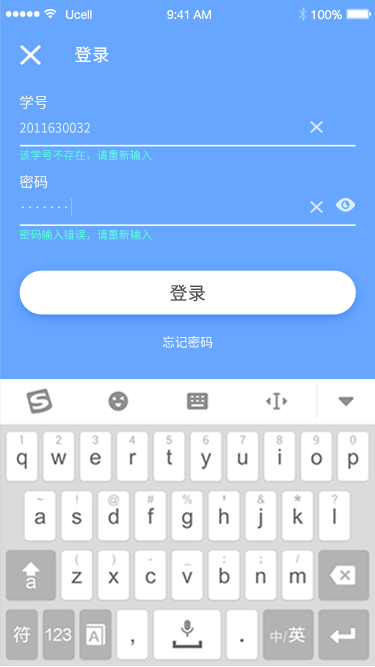
<style>
.page{position:relative;width:375px;height:667px;background:#66a6ff}
.page>*{position:absolute;margin:0}
.t1{font:17.4px "NotoSansHans-Regular";color:#ffffff}
.t2{font:14.6px "NotoSansHans-Regular";color:#ffffff;text-transform:uppercase}
.t3{font:12.9px "NotoSansHans-Regular";color:#e6efff;text-transform:uppercase}
.t4{font:11.1px "NotoSansHans-Regular";color:#57ffda;text-transform:uppercase}
.t5{font:17.9px "NotoSansHans-Regular";letter-spacing:0.02em;color:#535353}
.t6{font:13px "NotoSansHans-Regular";letter-spacing:-0.02em;color:#ffffff}
</style>
<div class="page">
<p class="t1" style="left:75px;top:46px;width:34px;height:17px">登录</p>
<p class="t2" style="left:20px;top:95px;width:28px;height:14px">学号</p>
<p class="t3" style="left:20px;top:122px;width:70px;height:11px">2011630032</p>
<p class="t4" style="left:19px;top:149px;width:133px;height:12px">该学号不存在，请重新输入</p>
<p class="t2" style="left:20px;top:175px;width:28px;height:14px">密码</p>
<p class="t3" style="left:22px;top:206px;width:45px;height:3px">·······</p>
<p class="t4" style="left:19px;top:229px;width:133px;height:11px">密码输入错误，请重新输入</p>
<p class="t5" style="left:170px;top:284px;width:35px;height:18px">登录</p>
<p class="t6" style="left:162px;top:336px;width:51px;height:12px">忘记密码</p>
</div>
